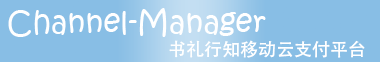
<style>
.page{position:relative;width:380px;height:62px;background:#88bee5}
.page>*{position:absolute;margin:0}
.t1{font:30px "KristenITC-Regular";color:#ffffff}
.t2{font:18px "AdobeHeitiStd-Regular";color:#ffffff}
</style>
<div class="page">
<p class="t1" style="left:8px;top:8px;width:258px;height:29px">Channel-Manager</p>
<p class="t2" style="left:169px;top:40px;width:196px;height:18px">书礼行知移动云支付平台</p>
</div>
